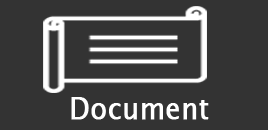
<style>
.page{position:relative;width:268px;height:130px;background:#333333}
.page>*{position:absolute;margin:0}
.t1{font:30px "LucidaSansUnicode";color:#ffffff;font-weight:bold;scale:0.9 1}
</style>
<div class="page">
<p class="t1" style="left:71px;top:97px;width:138px;height:23px">Document</p>
</div>
